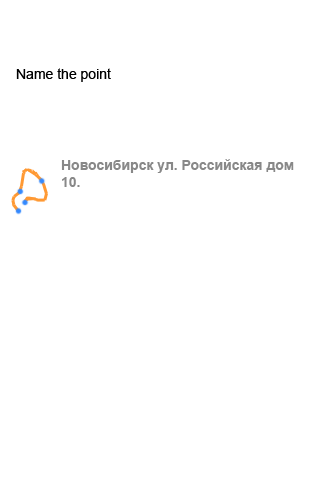
<style>
.page{position:relative;width:320px;height:480px;background:#ffffff}
.page>*{position:absolute;margin:0}
.t1{font:14px "ArialMT";color:#000000}
.t2{font:14px "Arial-BoldMT";color:#888888}
</style>
<div class="page">
<p class="t1" style="left:16px;top:68px;width:95px;height:14px">Name the point</p>
<p class="t2" style="left:61px;top:159px;width:233px;height:28px">Новосибирск ул. Российская дом <br>10.</p>
</div>
